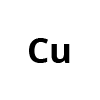
<style>
.page{position:relative;width:100px;height:100px;background:#ffffff}
.page>*{position:absolute;margin:0}
.t1{font:35px "OpenSans-Bold";color:#000000}
</style>
<div class="page">
<p class="t1" style="left:29px;top:38px;width:41px;height:25px">Cu</p>
</div>
